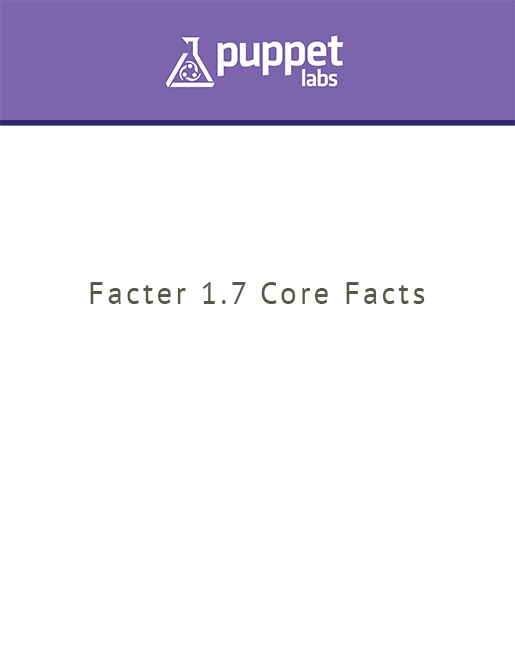
<style>
.page{position:relative;width:515px;height:666px;background:#ffffff}
.page>*{position:absolute;margin:0}
.t1{font:31.1px "PTSans-Regular";letter-spacing:0.1em;color:#57574a}
</style>
<div class="page">
<p class="t1" style="left:90px;top:282px;width:335px;height:22px">Facter 1.7 Core Facts</p>
</div>
